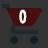
<style>
.page{position:relative;width:48px;height:48px;background:#333333}
.page>*{position:absolute;margin:0}
.t1{font:18px "ArialRoundedMTBold";letter-spacing:0.12em;color:#ffffff;font-weight:bold;scale:0.67 1}
</style>
<div class="page">
<p class="t1" style="left:19px;top:9px;width:8px;height:15px">0</p>
</div>
